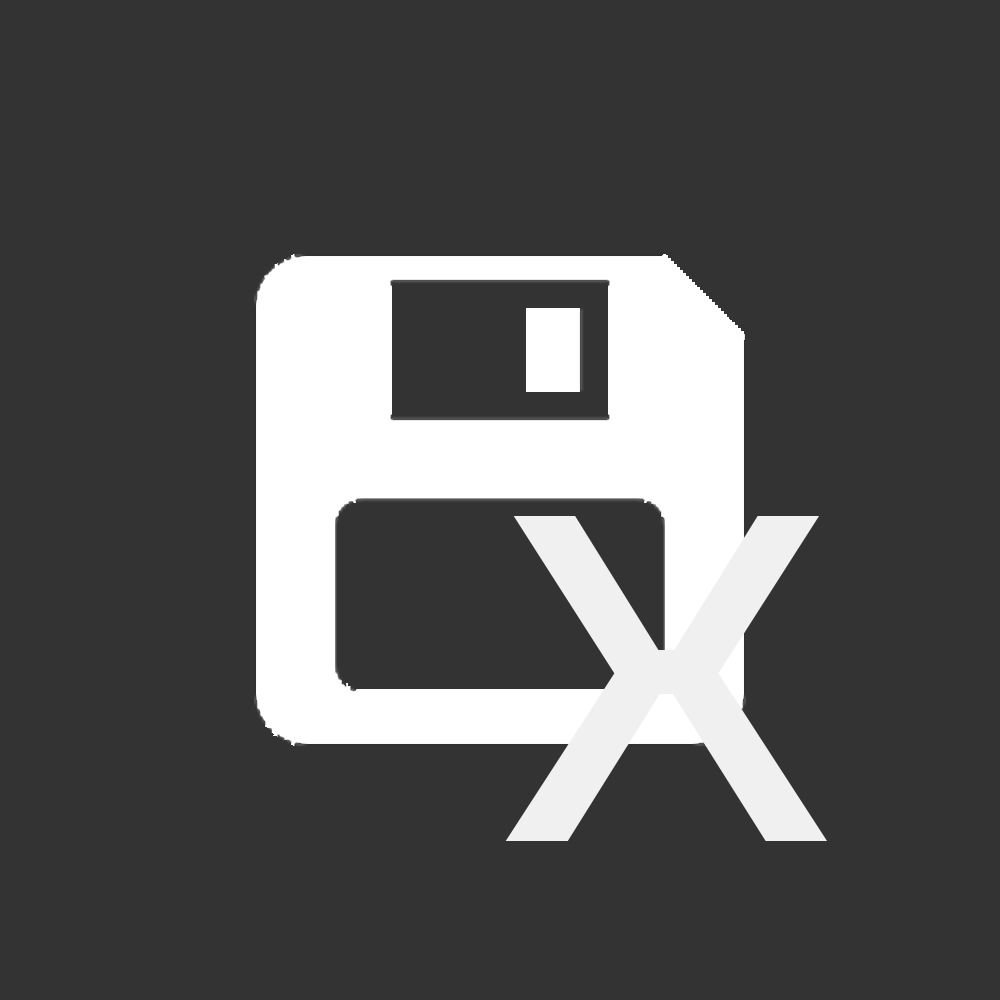
<style>
.page{position:relative;width:1000px;height:1000px;background:#333333}
.page>*{position:absolute;margin:0}
.t1{font:666.7px "Exo2-Regular";color:#f0f0f0}
</style>
<div class="page">
<p class="t1" style="left:505px;top:516px;width:322px;height:325px">x</p>
</div>
